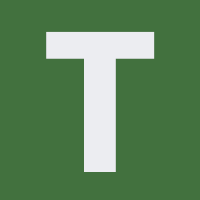
<style>
.page{position:relative;width:200px;height:200px;background:#42713e}
.page>*{position:absolute;margin:0}
.t1{font:208.3px "MyriadPro-Bold";color:#ecedf1}
</style>
<div class="page">
<p class="t1" style="left:46px;top:31px;width:109px;height:141px">T</p>
</div>
